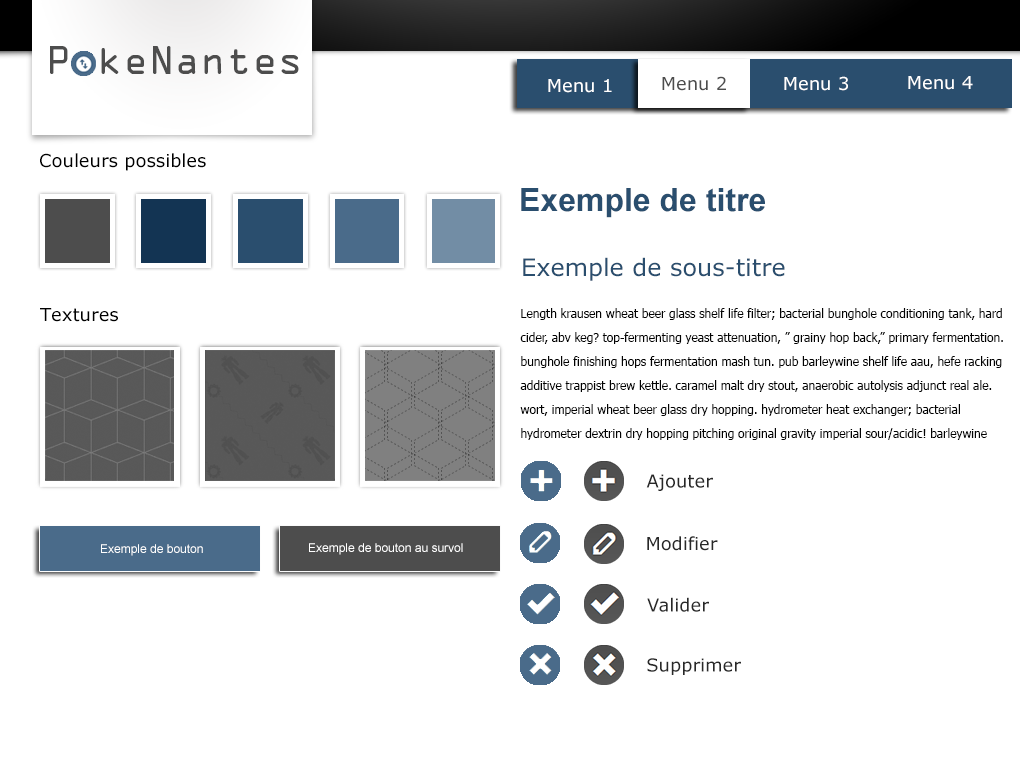
<style>
.page{position:relative;width:1020px;height:760px;background:#ffffff}
.page>*{position:absolute;margin:0}
.t1{font:35.8px "OCRAStd";color:#4d4d4d}
.t2{font:35.6px "OCRAStd";color:#4d4d4d}
.t3{font:18px "Verdana";color:#4d4d4d}
.t4{font:18px "Verdana";color:#ffffff}
.t5{font:18px "Verdana";color:#000000}
.t6{font:32px "Arial-BoldMT";color:#2a4e6e}
.t7{font:24px "Verdana";color:#2a4e6e}
.t8{font:12px/24px "Tahoma";color:#020202}
.t9{font:18px "Verdana";color:#282828}
.t10{font:12px "ArialMT";color:#ffffff}
</style>
<div class="page">
<p class="t1" style="left:50px;top:46px;width:249px;height:28px"><span class="t2">P ke</span>Nantes</p>
<p class="t3" style="left:662px;top:76px;width:64px;height:15px">Menu 2</p>
<p class="t4" style="left:784px;top:76px;width:64px;height:15px">Menu 3</p>
<p class="t4" style="left:908px;top:76px;width:65px;height:14px">Menu 4</p>
<p class="t4" style="left:548px;top:79px;width:64px;height:14px">Menu 1</p>
<p class="t5" style="left:40px;top:153px;width:166px;height:18px">Couleurs possibles</p>
<p class="t6" style="left:521px;top:188px;width:244px;height:30px">Exemple de titre</p>
<p class="t7" style="left:523px;top:257px;width:262px;height:24px">Exemple de sous-titre</p>
<p class="t5" style="left:40px;top:308px;width:78px;height:14px">Textures</p>
<p class="t8" style="left:520px;top:308px;width:483px;height:132px">Length krausen wheat beer glass shelf life filter; bacterial bunghole conditioning tank, hard <br>cider, abv keg? top-fermenting yeast attenuation, ” grainy hop back,” primary fermentation. <br>bunghole finishing hops fermentation mash tun. pub barleywine shelf life aau, hefe racking <br>additive trappist brew kettle. caramel malt dry stout, anaerobic autolysis adjunct real ale.<br>wort, imperial wheat beer glass dry hopping. hydrometer heat exchanger; bacterial <br>hydrometer dextrin dry hopping pitching original gravity imperial sour/acidic! barleywine</p>
<p class="t9" style="left:646px;top:474px;width:67px;height:17px">Ajouter</p>
<p class="t10" style="left:101px;top:544px;width:102px;height:12px">Exemple de bouton</p>
<p class="t10" style="left:309px;top:543px;width:154px;height:12px">Exemple de bouton au survol</p>
<p class="t9" style="left:647px;top:536px;width:71px;height:15px">Modifier</p>
<p class="t9" style="left:647px;top:597px;width:62px;height:15px">Valider</p>
<p class="t9" style="left:647px;top:658px;width:94px;height:17px">Supprimer</p>
</div>
